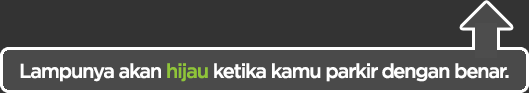
<style>
.page{position:relative;width:529px;height:93px;background:#333333}
.page>*{position:absolute;margin:0}
.t1{font:20px "iCielGotham-Medium";letter-spacing:-0.06em;color:#ffffff}
.t2{font:20px "iCielGotham-Medium";letter-spacing:-0.06em;color:#8fc439}
</style>
<div class="page">
<p class="t1" style="left:20px;top:63px;width:489px;height:19px">Lampunya akan <span class="t2">hijau </span>ketika kamu parkir dengan benar.</p>
</div>
